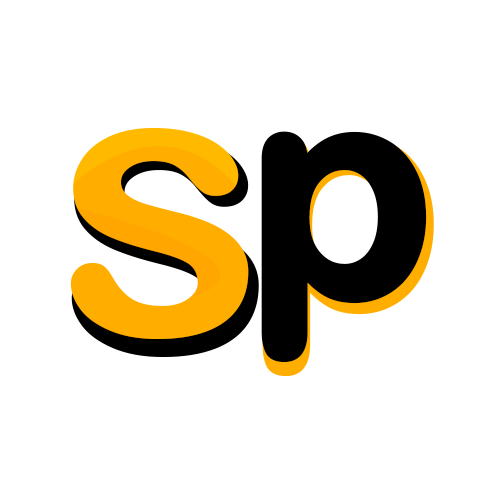
<style>
.page{position:relative;width:500px;height:500px;background:#ffffff}
.page>*{position:absolute;margin:0}
.t1{font:388.4px "ArialRoundedMTBold";color:#ffae00}
.t2{font:409.2px "ArialRoundedMTBold";color:#ffae00}
.t3{font:300px "ArialRoundedMTBold";color:#000000;font-weight:bold}
.t4{font:313.3px "ArialRoundedMTBold";color:#000000;font-weight:bold}
</style>
<div class="page">
<p class="t1" style="left:70px;top:128px;width:179px;height:211px">s</p>
<p class="t2" style="left:71px;top:135px;width:188px;height:222px">s</p>
<p class="t3" style="left:261px;top:131px;width:166px;height:232px">p</p>
<p class="t4" style="left:262px;top:135px;width:172px;height:242px">p</p>
</div>
